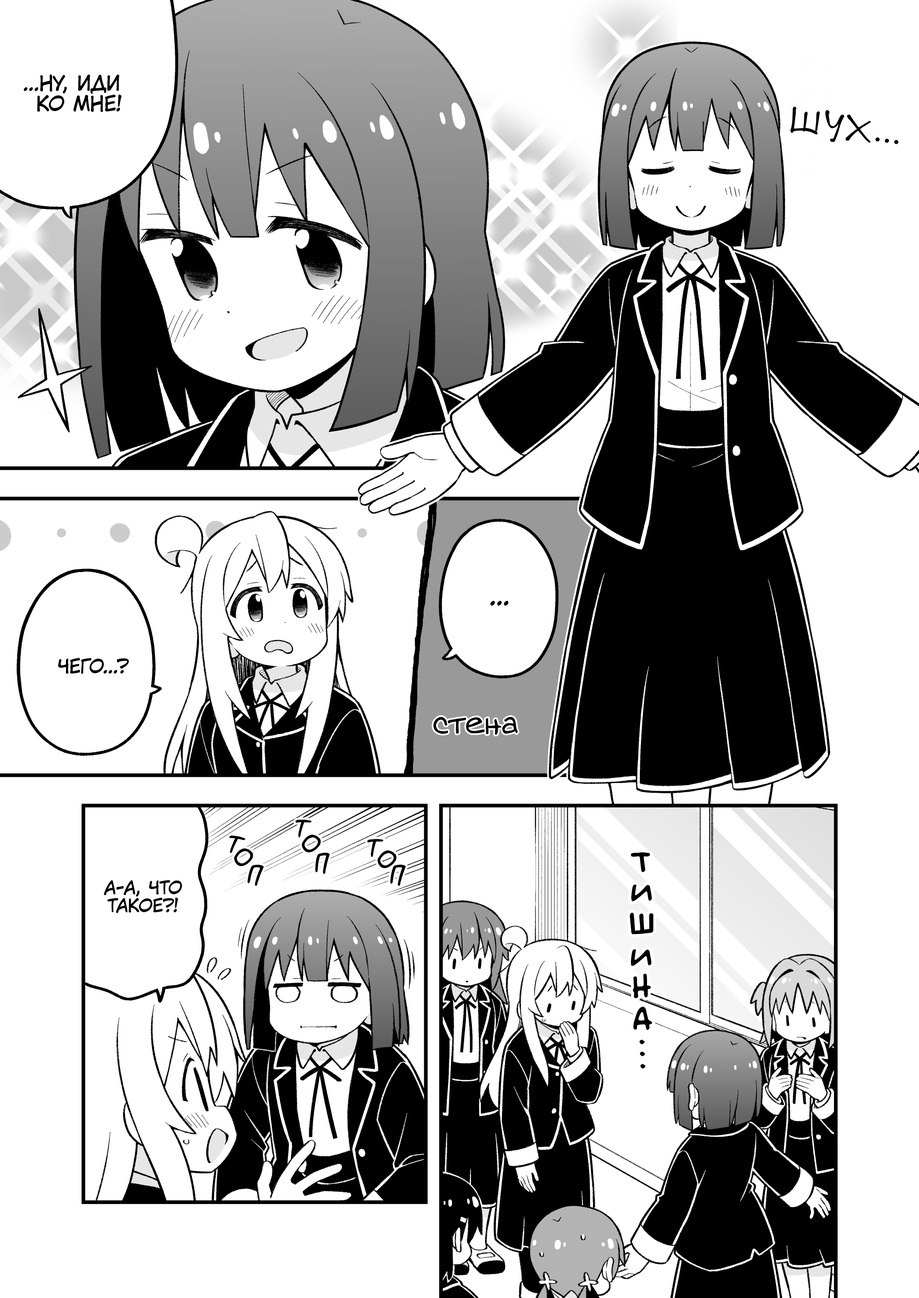
<style>
.page{position:relative;width:919px;height:1298px;background:#ffffff}
.page>*{position:absolute;margin:0}
.t1{font:20.4px "KuraiVoice2";color:#000000;text-transform:uppercase}
.t2{font:38.3px "DSNote";color:#000000;text-transform:uppercase}
.t3{font:25.5px "DSNote";color:#000000;text-transform:uppercase}
.t4{font:25.5px "KuraiVoice2";color:#000000;text-transform:uppercase}
.t5{font:19.1px "KuraiVoice2";color:#000000;text-transform:uppercase}
.t6{font:31.9px "v_Augie";color:#000000}
.t7{font:30.6px "v_MangaMasterBB";color:#000000}
.t8{font:38.3px "v_BillyTheFlyingRobotBBLC";color:#000000;text-transform:uppercase}
.t9{font:17.9px "KuraiVoice2";color:#000000;text-transform:uppercase}
</style>
<div class="page">
<p class="t1" style="left:24px;top:74px;width:98px;height:38px;text-align:center">...Ну, иди<br>ко мне!</p>
<p class="t2" style="left:790px;top:106px;width:30px;height:28px;rotate:6deg">ш</p>
<p class="t2" style="left:825px;top:110px;width:20px;height:32px;rotate:6deg">у</p>
<p class="t2" style="left:845px;top:114px;width:26px;height:29px;rotate:6deg">х</p>
<p class="t3" style="left:875px;top:137px;width:5px;height:5px;rotate:6deg">.</p>
<p class="t3" style="left:884px;top:139px;width:5px;height:4px;rotate:6deg">.</p>
<p class="t3" style="left:894px;top:140px;width:5px;height:4px;rotate:6deg">.</p>
<p class="t4" style="left:490px;top:600px;width:18px;height:5px">...</p>
<p class="t5" style="left:58px;top:658px;width:71px;height:16px">Чего...?</p>
<p class="t6" style="left:433px;top:716px;width:85px;height:19px">стена</p>
<p class="t7" style="left:295px;top:819px;width:16px;height:18px;rotate:13deg">т</p>
<p class="t7" style="left:229px;top:835px;width:16px;height:18px;rotate:22deg">т</p>
<p class="t7" style="left:302px;top:834px;width:19px;height:18px">о</p>
<p class="t7" style="left:367px;top:839px;width:16px;height:18px;rotate:10deg">т</p>
<p class="t7" style="left:234px;top:848px;width:19px;height:18px">о</p>
<p class="t7" style="left:315px;top:852px;width:15px;height:22px;rotate:11deg">п</p>
<p class="t7" style="left:377px;top:850px;width:20px;height:18px">о</p>
<p class="t8" style="left:631px;top:852px;width:19px;height:20px">т</p>
<p class="t7" style="left:248px;top:864px;width:16px;height:22px;rotate:18deg">п</p>
<p class="t7" style="left:390px;top:864px;width:16px;height:22px;rotate:15deg">п</p>
<p class="t9" style="left:104px;top:880px;width:78px;height:33px;text-align:center">А-а, что<br>такое?!</p>
<p class="t8" style="left:631px;top:884px;width:21px;height:17px">и</p>
<p class="t8" style="left:630px;top:912px;width:23px;height:22px">ш</p>
<p class="t8" style="left:631px;top:949px;width:20px;height:17px">и</p>
<p class="t8" style="left:633px;top:973px;width:18px;height:25px">н</p>
<p class="t8" style="left:633px;top:1006px;width:19px;height:24px">а</p>
<p class="t8" style="left:639px;top:1039px;width:6px;height:5px">.</p>
<p class="t8" style="left:640px;top:1051px;width:5px;height:5px">.</p>
<p class="t8" style="left:640px;top:1064px;width:5px;height:4px">.</p>
</div>
